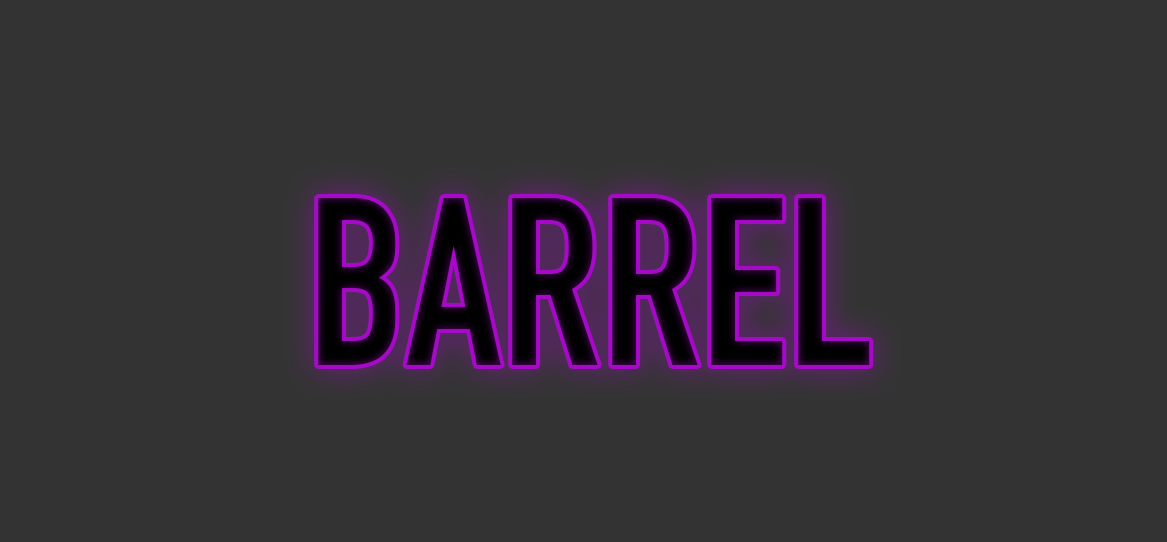
<style>
.page{position:relative;width:1167px;height:542px;background:#333333}
.page>*{position:absolute;margin:0}
.t1{font:233.7px "DINEngschrift";color:#070009}
</style>
<div class="page">
<p class="t1" style="left:318px;top:198px;width:552px;height:167px">BARREL</p>
</div>
